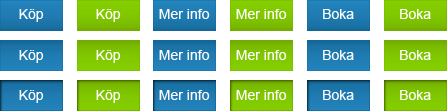
<style>
.page{position:relative;width:447px;height:111px;background:#ffffff}
.page>*{position:absolute;margin:0}
.t1{font:14px "ArialMT";color:#ffffff}
</style>
<div class="page">
<p class="t1" style="left:19px;top:9px;width:25px;height:13px">Köp</p>
<p class="t1" style="left:96px;top:9px;width:25px;height:13px">Köp</p>
<p class="t1" style="left:159px;top:9px;width:51px;height:10px">Mer info</p>
<p class="t1" style="left:236px;top:9px;width:51px;height:10px">Mer info</p>
<p class="t1" style="left:323px;top:9px;width:31px;height:10px">Boka</p>
<p class="t1" style="left:400px;top:9px;width:31px;height:10px">Boka</p>
<p class="t1" style="left:19px;top:50px;width:25px;height:13px">Köp</p>
<p class="t1" style="left:96px;top:50px;width:25px;height:13px">Köp</p>
<p class="t1" style="left:159px;top:50px;width:51px;height:10px">Mer info</p>
<p class="t1" style="left:236px;top:50px;width:51px;height:10px">Mer info</p>
<p class="t1" style="left:323px;top:50px;width:31px;height:10px">Boka</p>
<p class="t1" style="left:400px;top:50px;width:31px;height:10px">Boka</p>
<p class="t1" style="left:19px;top:90px;width:25px;height:13px">Köp</p>
<p class="t1" style="left:96px;top:90px;width:25px;height:13px">Köp</p>
<p class="t1" style="left:159px;top:90px;width:51px;height:10px">Mer info</p>
<p class="t1" style="left:236px;top:90px;width:51px;height:10px">Mer info</p>
<p class="t1" style="left:323px;top:90px;width:31px;height:10px">Boka</p>
<p class="t1" style="left:400px;top:90px;width:31px;height:10px">Boka</p>
</div>
